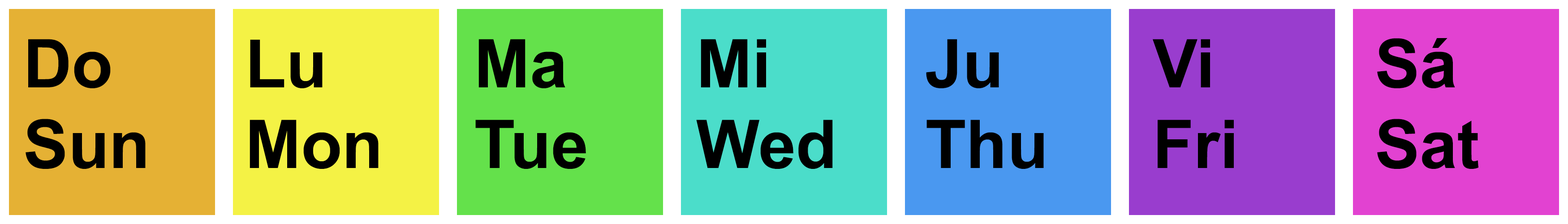
<style>
.page{position:relative;width:1568px;height:224px}
.page>*{position:absolute;margin:0}
.t1{font:67.2px "Arial-BoldMT";color:#000000}
</style>
<div class="page">
<p class="t1" style="left:26px;top:39px;width:120px;height:130px">Do<br>Sun</p>
<p class="t1" style="left:250px;top:39px;width:129px;height:130px">Lu<br>Mon</p>
<p class="t1" style="left:475px;top:39px;width:111px;height:130px">Ma<br>Tue</p>
<p class="t1" style="left:696px;top:39px;width:137px;height:130px">Mi<br>Wed</p>
<p class="t1" style="left:926px;top:39px;width:118px;height:130px">Ju<br>Thu</p>
<p class="t1" style="left:1153px;top:39px;width:81px;height:129px">Vi<br>Fri</p>
<p class="t1" style="left:1377px;top:38px;width:101px;height:131px">Sá<br>Sat</p>
</div>
